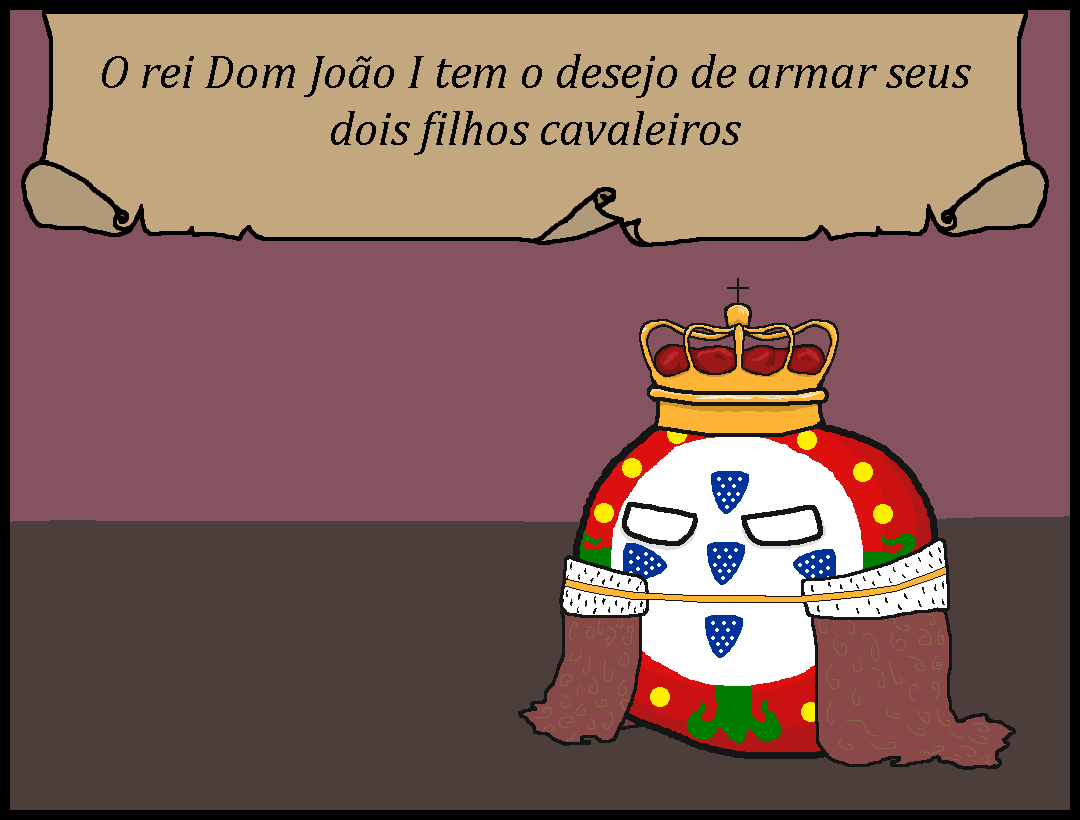
<style>
.page{position:relative;width:1080px;height:820px;background:#84535f}
.page>*{position:absolute;margin:0}
.t1{font:48px "Cambria-Italic";color:#000000}
</style>
<div class="page">
<p class="t1" style="left:102px;top:54px;width:869px;height:101px;text-align:center">O rei Dom João I tem o desejo de armar seus dois filhos cavaleiros</p>
</div>
